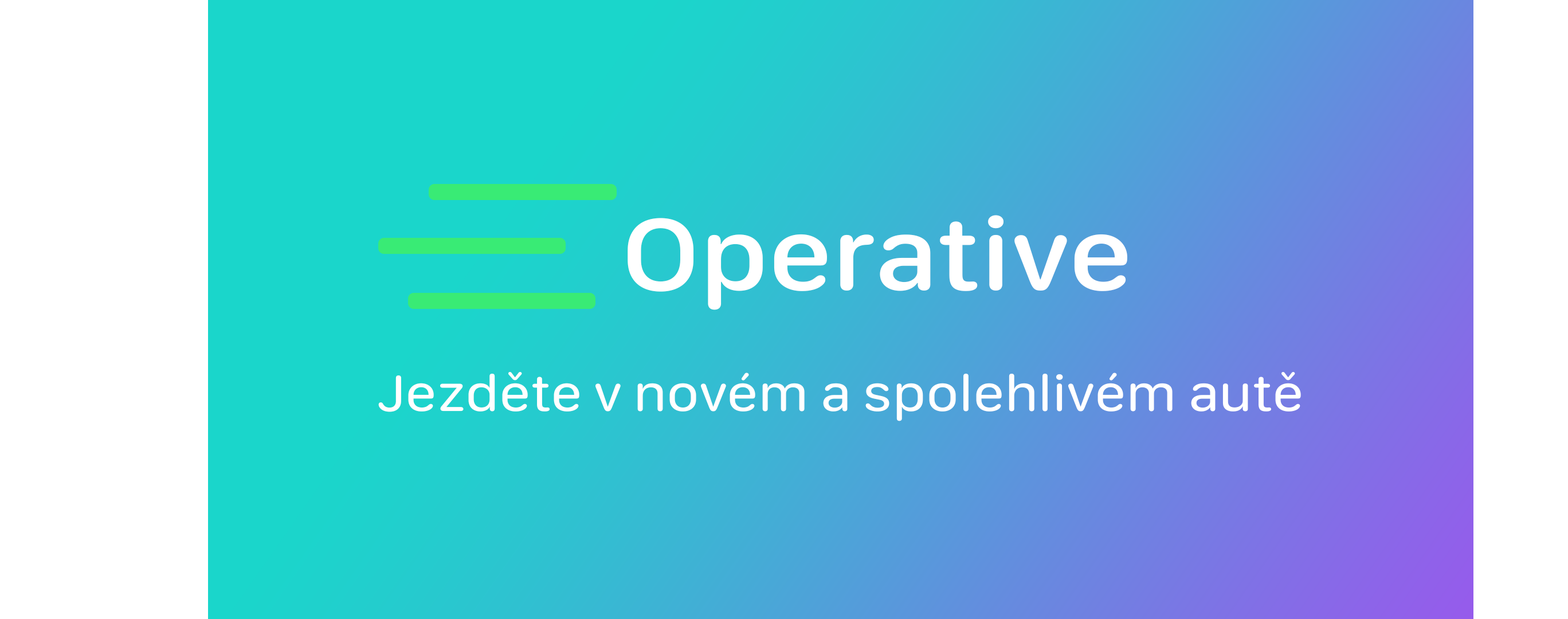
<style>
.page{position:relative;width:1568px;height:619px}
.page>*{position:absolute;margin:0}
.t1{font:105.8px "SFCompactRounded-Medium";color:#ffffff;scale:1.13 1}
.t2{font:52.9px "SFCompactRounded-Regular";color:#ffffff;scale:1.13 1}
</style>
<div class="page">
<p class="t1" style="left:628px;top:215px;width:499px;height:95px">Operative</p>
<p class="t2" style="left:378px;top:372px;width:923px;height:49px">Jezděte v novém a spolehlivém autě</p>
</div>
